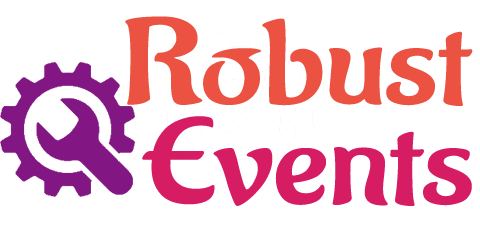
<style>
.page{position:relative;width:480px;height:240px;background:#ffffff}
.page>*{position:absolute;margin:0}
.t1{font:120px/100px "Aladin-Regular";color:#ec5242;scale:1.25 1}
.t2{font:120px/100px "Aladin-Regular";color:#d61c62;scale:1.25 1}
</style>
<div class="page">
<p class="t1" style="left:125px;top:16px;width:348px;height:190px;text-align:center"><span class="t2">    </span>Robust<br><span class="t2">     Events</span></p>
</div>
